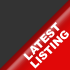
<style>
.page{position:relative;width:70px;height:70px;background:#333333}
.page>*{position:absolute;margin:0}
.t1{font:11px/11px "Arial-Black";color:#ffffff}
</style>
<div class="page">
<p class="t1" style="left:23px;top:22px;width:46px;height:47px;text-align:center;rotate:-45deg">LATEST<br>LISTING</p>
</div>
